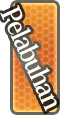
<style>
.page{position:relative;width:66px;height:115px;background:#ffffff}
.page>*{position:absolute;margin:0}
.t1{font:28px "HeiseiMinStd-W7";letter-spacing:-0.04em;color:#fffef9;scale:0.9 1}
</style>
<div class="page">
<p class="t1" style="left:0px;top:5px;width:57px;height:107px;rotate:65deg">Pelabuhan</p>
</div>
